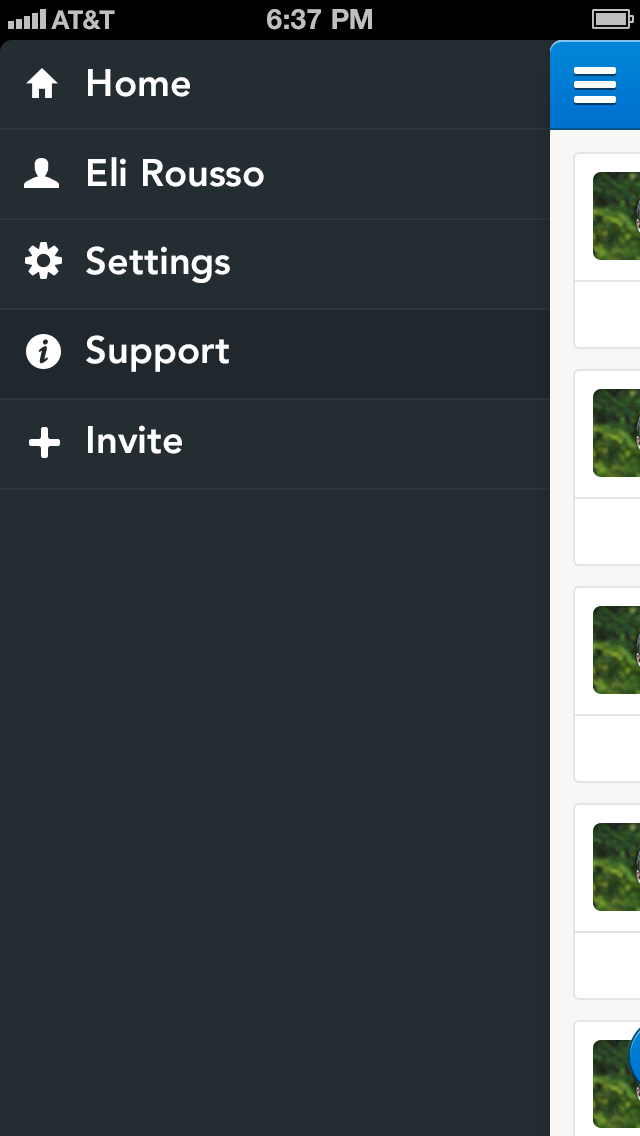
<style>
.page{position:relative;width:640px;height:1136px;background:#242d32}
.page>*{position:absolute;margin:0}
.t1{font:38px "Avenir-Heavy";color:#ffffff}
</style>
<div class="page">
<p class="t1" style="left:88px;top:69px;width:102px;height:28px">Home</p>
<p class="t1" style="left:88px;top:157px;width:176px;height:30px">Eli Rousso</p>
<p class="t1" style="left:86px;top:246px;width:144px;height:37px">Settings</p>
<p class="t1" style="left:86px;top:335px;width:143px;height:37px">Support</p>
<p class="t1" style="left:88px;top:425px;width:94px;height:29px">Invite</p>
</div>
